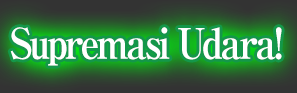
<style>
.page{position:relative;width:297px;height:93px}
.page>*{position:absolute;margin:0}
.t1{font:42px "RyuminPro-ExBold";letter-spacing:-0.08em;color:#ffffff;scale:0.9 1}
</style>
<div class="page">
<p class="t1" style="left:10px;top:27px;width:272px;height:39px">Supremasi Udara!</p>
</div>
